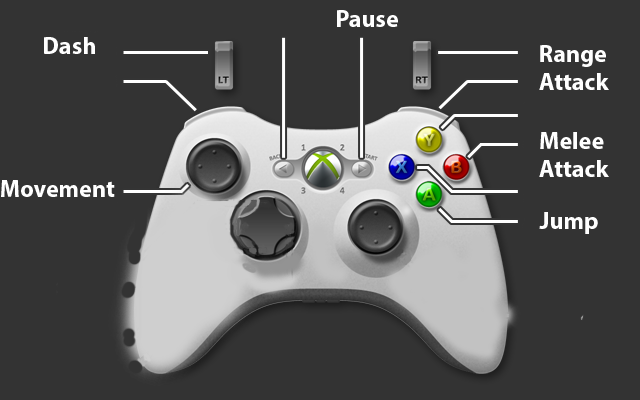
<style>
.page{position:relative;width:640px;height:400px;background:#333333}
.page>*{position:absolute;margin:0}
.t1{font:24px "MyriadPro-Bold";color:#ffffff}
</style>
<div class="page">
<p class="t1" style="left:337px;top:10px;width:61px;height:17px">Pause</p>
<p class="t1" style="left:44px;top:37px;width:51px;height:17px">Dash</p>
<p class="t1" style="left:539px;top:45px;width:70px;height:45px">Range<br>Attack</p>
<p class="t1" style="left:539px;top:132px;width:70px;height:45px">Melee <br>Attack</p>
<p class="t1" style="left:1px;top:180px;width:114px;height:17px">Movement</p>
<p class="t1" style="left:539px;top:212px;width:59px;height:22px">Jump</p>
</div>
